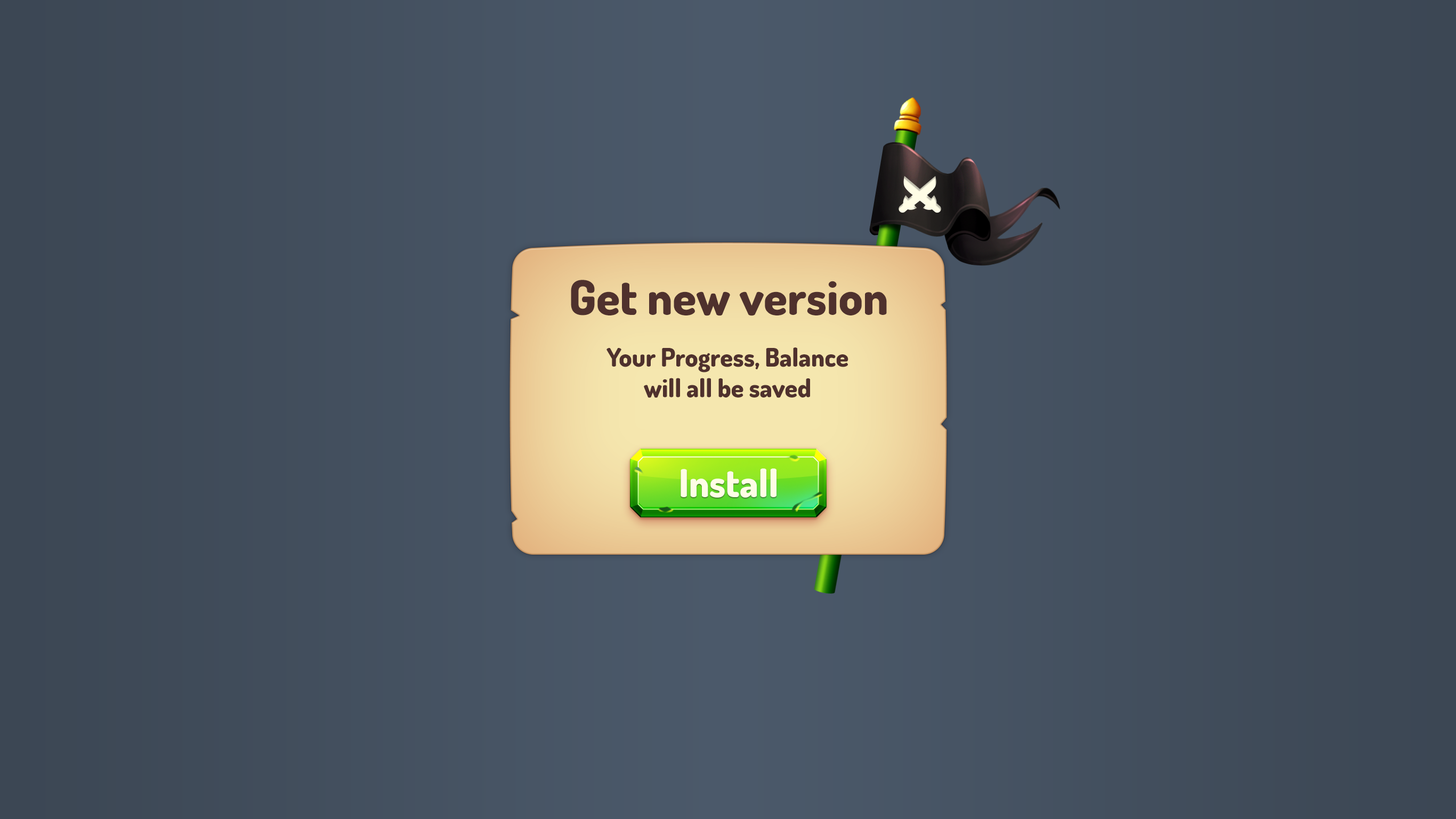
<style>
.page{position:relative;width:1456px;height:819px}
.page>*{position:absolute;margin:0}
.t1{font:48px "Dosis-ExtraBold";color:#4f312d}
.t2{font:25.6px "Dosis-ExtraBold";color:#4f312d}
.t3{font:38.4px "Dosis-ExtraBold";color:#fffde6}
</style>
<div class="page">
<p class="t1" style="left:571px;top:280px;width:316px;height:36px">Get new version</p>
<p class="t2" style="left:606px;top:347px;width:242px;height:51px;text-align:center">Your Progress, Balance<br>will all be saved</p>
<p class="t3" style="left:681px;top:468px;width:95px;height:30px">Install</p>
</div>
